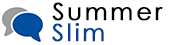
<style>
.page{position:relative;width:170px;height:45px;background:#ffffff}
.page>*{position:absolute;margin:0}
.t1{font:24px "CenturyGothic";letter-spacing:0.1em;color:#000000;font-weight:bold}
.t2{font:24px "CenturyGothic";letter-spacing:0.1em;color:#004395;font-weight:bold}
</style>
<div class="page">
<p class="t1" style="left:52px;top:2px;width:111px;height:19px">Summer</p>
<p class="t2" style="left:52px;top:23px;width:52px;height:19px">Slim</p>
</div>
